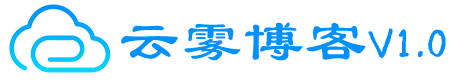
<style>
.page{position:relative;width:450px;height:80px;background:#ffffff}
.page>*{position:absolute;margin:0}
.t1{font:60px "LiSu";letter-spacing:0.04em;color:#0090ff}
.t2{font:36px "AxureHandwriting";letter-spacing:0.04em;color:#0090ff}
</style>
<div class="page">
<p class="t1" style="left:121px;top:22px;width:325px;height:39px">云雾博客<span class="t2">V1.0</span></p>
</div>
